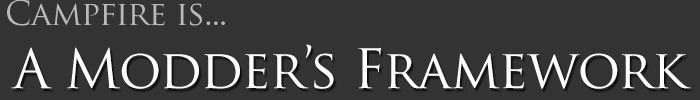
<style>
.page{position:relative;width:700px;height:100px;background:#333333}
.page>*{position:absolute;margin:0}
.t1{font:33px "TrajanPro-Regular";letter-spacing:-0.025em;color:#b9b9b9}
.t2{font:53px "TrajanPro-Regular";letter-spacing:-0.025em;color:#ffffff}
</style>
<div class="page">
<p class="t1" style="left:7px;top:0px;width:218px;height:26px">Campfire is...</p>
<p class="t2" style="left:11px;top:44px;width:680px;height:45px">A Modder’s Framework</p>
</div>
